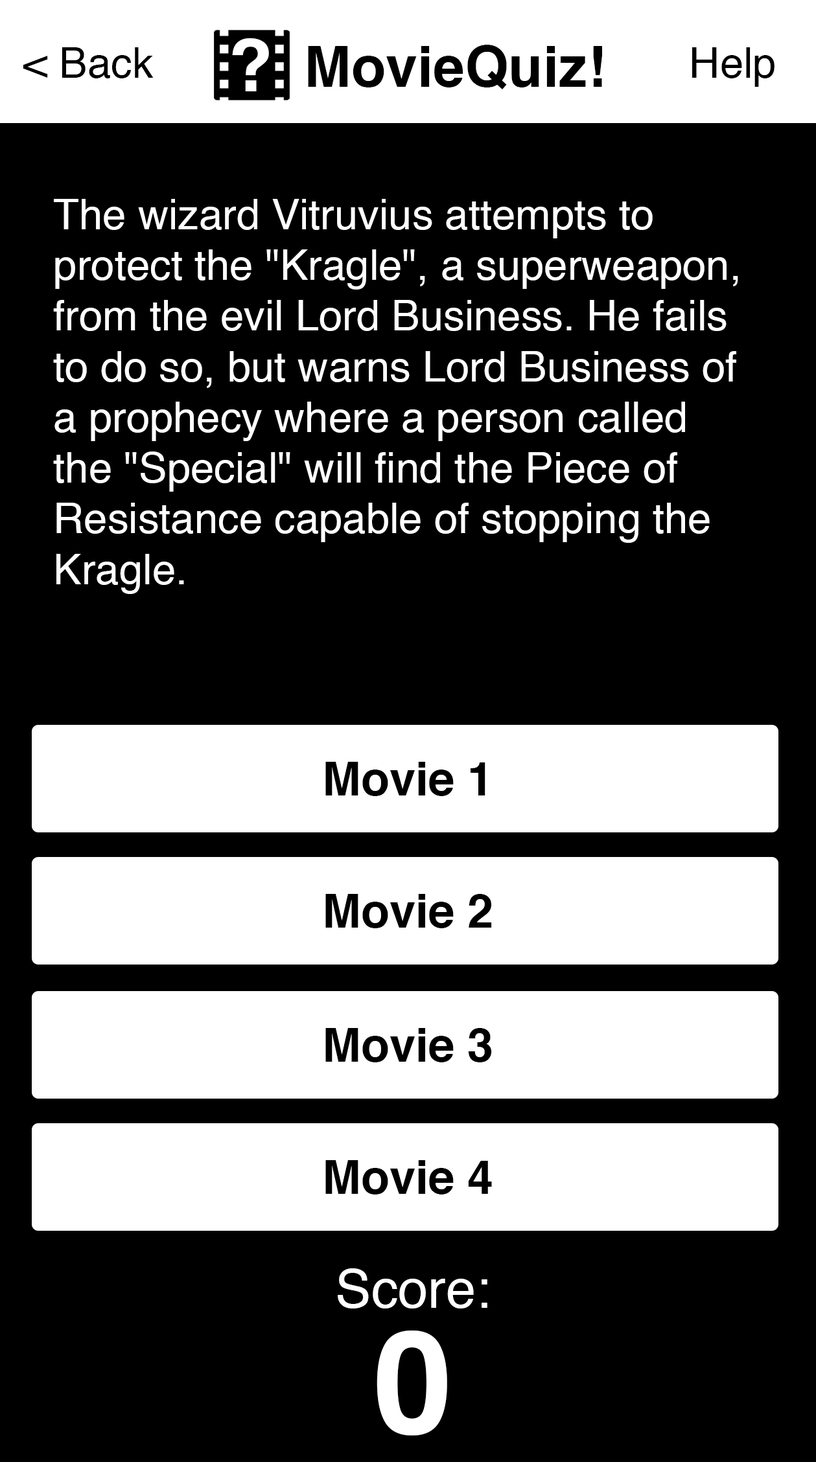
<style>
.page{position:relative;width:816px;height:1462px;background:#000000}
.page>*{position:absolute;margin:0}
.t1{font:73.2px "Helvetica-Bold";color:#ffffff}
.t2{font:42.3px "Helvetica";color:#000000}
.t3{font:56.6px "Helvetica-Bold";color:#000000}
.t4{font:42.3px "Helvetica";color:#ffffff}
.t5{font:46.6px "Helvetica-Bold";color:#000000}
.t6{font:53.7px "Helvetica";color:#ffffff}
.t7{font:143px "Helvetica-Bold";color:#ffffff}
</style>
<div class="page">
<p class="t1" style="left:232px;top:38px;width:37px;height:53px">?</p>
<p class="t2" style="left:23px;top:47px;width:131px;height:31px">&lt; Back</p>
<p class="t3" style="left:308px;top:45px;width:294px;height:44px">MovieQuiz!</p>
<p class="t2" style="left:692px;top:47px;width:82px;height:40px">Help</p>
<p class="t4" style="left:53px;top:199px;width:685px;height:395px">The wizard Vitruvius attempts to protect the "Kragle", a superweapon, from the evil Lord Business. He fails to do so, but warns Lord Business of a prophecy where a person called the "Special" will find the Piece of Resistance capable of stopping the Kragle.</p>
<p class="t5" style="left:325px;top:762px;width:160px;height:34px">Movie 1</p>
<p class="t5" style="left:325px;top:894px;width:167px;height:34px">Movie 2</p>
<p class="t5" style="left:325px;top:1028px;width:167px;height:34px">Movie 3</p>
<p class="t5" style="left:325px;top:1160px;width:167px;height:35px">Movie 4</p>
<p class="t6" style="left:338px;top:1268px;width:149px;height:41px">Score:</p>
<p class="t7" style="left:376px;top:1331px;width:71px;height:105px">0</p>
</div>
